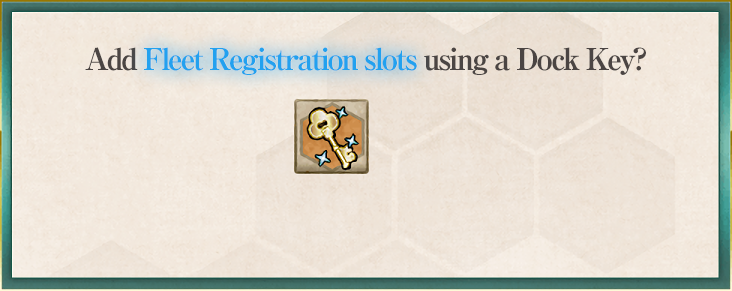
<style>
.page{position:relative;width:732px;height:291px}
.page>*{position:absolute;margin:0}
.t1{font:30px "RyuminPro-ExBold";letter-spacing:-0.08em;color:#22a1ef}
.t2{font:30px "RyuminPro-ExBold";letter-spacing:-0.08em;color:#4b4543}
</style>
<div class="page">
<p class="t1" style="left:85px;top:47px;width:561px;height:28px"><span class="t2">Add </span>Fleet Registration slots<span class="t2"> using a Dock Key?</span></p>
<p class="t1" style="left:144px;top:47px;width:274px;height:28px">Fleet Registration slots</p>
</div>
